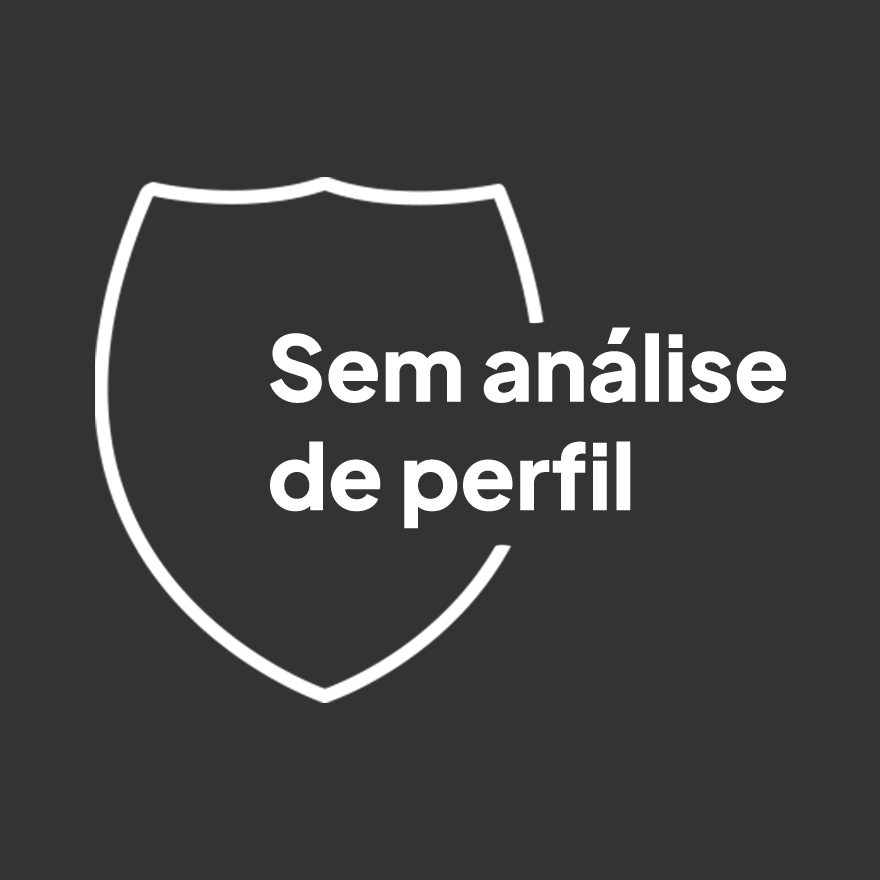
<style>
.page{position:relative;width:880px;height:880px;background:#333333}
.page>*{position:absolute;margin:0}
.t1{font:90.3px "PlusJakartaSans-ExtraBold";color:#ffffff}
</style>
<div class="page">
<p class="t1" style="left:270px;top:327px;width:516px;height:202px">Sem análise<br>de perf il</p>
</div>
